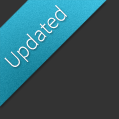
<style>
.page{position:relative;width:119px;height:119px;background:#333333}
.page>*{position:absolute;margin:0}
.t1{font:22px "SourceSansPro-Light";color:#ffffff}
</style>
<div class="page">
<p class="t1" style="left:4px;top:5px;width:63px;height:62px;rotate:-45deg">Updated</p>
</div>
